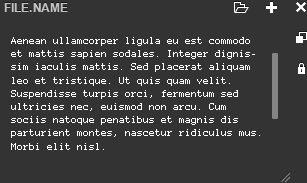
<style>
.page{position:relative;width:307px;height:183px;background:#333333}
.page>*{position:absolute;margin:0}
.t1{font:12px "Arial-BoldMT";text-transform:uppercase}
.t2{font:12px "Arial-BoldMT";color:#c2c2c2;text-transform:uppercase}
.t3{font:11px "AnonymousPro";color:#ffffff}
</style>
<div class="page">
<p class="t1" style="left:4px;top:2px;width:64px;height:9px">File.name</p>
<p class="t2" style="left:4px;top:3px;width:64px;height:9px">File.name</p>
<p class="t3" style="left:11px;top:37px;width:249px;height:113px">Aenean ullamcorper ligula eu est commodo et mattis sapien sodales. Integer dignissim iaculis mattis. Sed placerat aliquam leo et tristique. Ut quis quam velit. Suspendisse turpis orci, fermentum sed ultricies nec, euismod non arcu. Cum sociis natoque penatibus et magnis dis parturient montes, nascetur ridiculus mus. Morbi elit nisl.</p>
</div>
